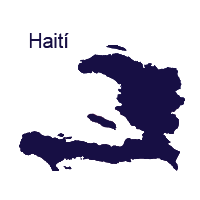
<style>
.page{position:relative;width:200px;height:200px;background:#ffffff}
.page>*{position:absolute;margin:0}
.t1{font:20.8px "ArialMT";color:#170f44;scale:0.94 1}
</style>
<div class="page">
<p class="t1" style="left:29px;top:33px;width:40px;height:15px">Haití</p>
</div>
